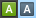
<style>
.page{position:relative;width:36px;height:18px}
.page>*{position:absolute;margin:0}
.t1{font:11px "Helvetica-Bold";color:#ffffff}
</style>
<div class="page">
<p class="t1" style="left:5px;top:5px;width:8px;height:8px">A</p>
<p class="t1" style="left:23px;top:5px;width:8px;height:8px">A</p>
</div>
